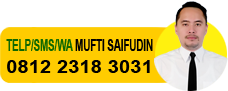
<style>
.page{position:relative;width:228px;height:91px;background:#ffffff}
.page>*{position:absolute;margin:0}
.t1{font:16.5px "Arial-BoldMT";color:#000000;scale:0.59 1}
.t2{font:16.5px "Arial-BoldMT";color:#0f6800;scale:0.59 1}
.t3{font:18.3px "Arial-BoldMT";color:#000000;scale:1.11 1}
</style>
<div class="page">
<p class="t1" style="left:6px;top:39px;width:147px;height:12px"><span class="t2">TELP/SMS/WA</span> MUFTI SAIFUDIN</p>
<p class="t3" style="left:7px;top:60px;width:143px;height:13px">0812 2318 3031</p>
</div>
